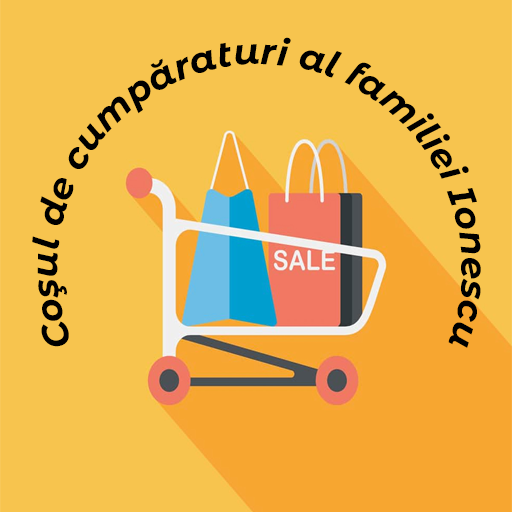
<style>
.page{position:relative;width:512px;height:512px;background:#f7c44e}
.page>*{position:absolute;margin:0}
.t1{font:36px "MontserratAlternates-BoldItalic";color:#000000}
</style>
<div class="page">
<p class="t1" style="left:32px;top:37px;width:449px;height:311px;text-align:center">Coşul de cumpăraturi al familiei Ionescu</p>
</div>
